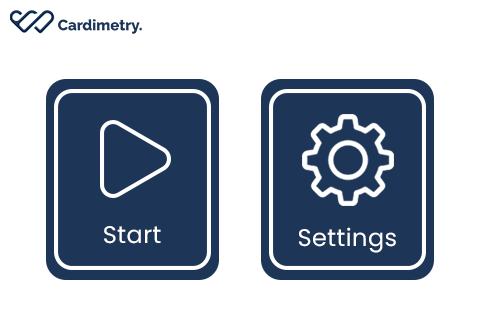
<style>
.page{position:relative;width:480px;height:320px;background:#ffffff}
.page>*{position:absolute;margin:0}
.t1{font:24px "Poppins-Regular";letter-spacing:0.02em;color:#ffffff}
</style>
<div class="page">
<p class="t1" style="left:104px;top:226px;width:57px;height:18px">Start</p>
<p class="t1" style="left:298px;top:227px;width:98px;height:26px">Settings</p>
</div>
